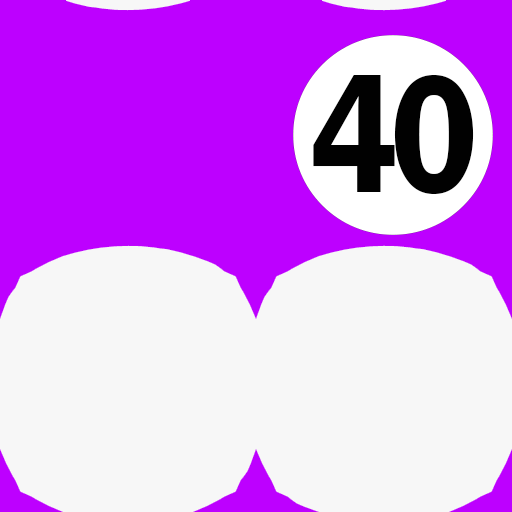
<style>
.page{position:relative;width:512px;height:512px;background:#f7f7f7}
.page>*{position:absolute;margin:0}
.t1{font:172.5px "FranklinGothic-Demi";letter-spacing:-0.05em;color:#010101;scale:0.87 1}
</style>
<div class="page">
<p class="t1" style="left:313px;top:75px;width:161px;height:119px">40</p>
</div>
